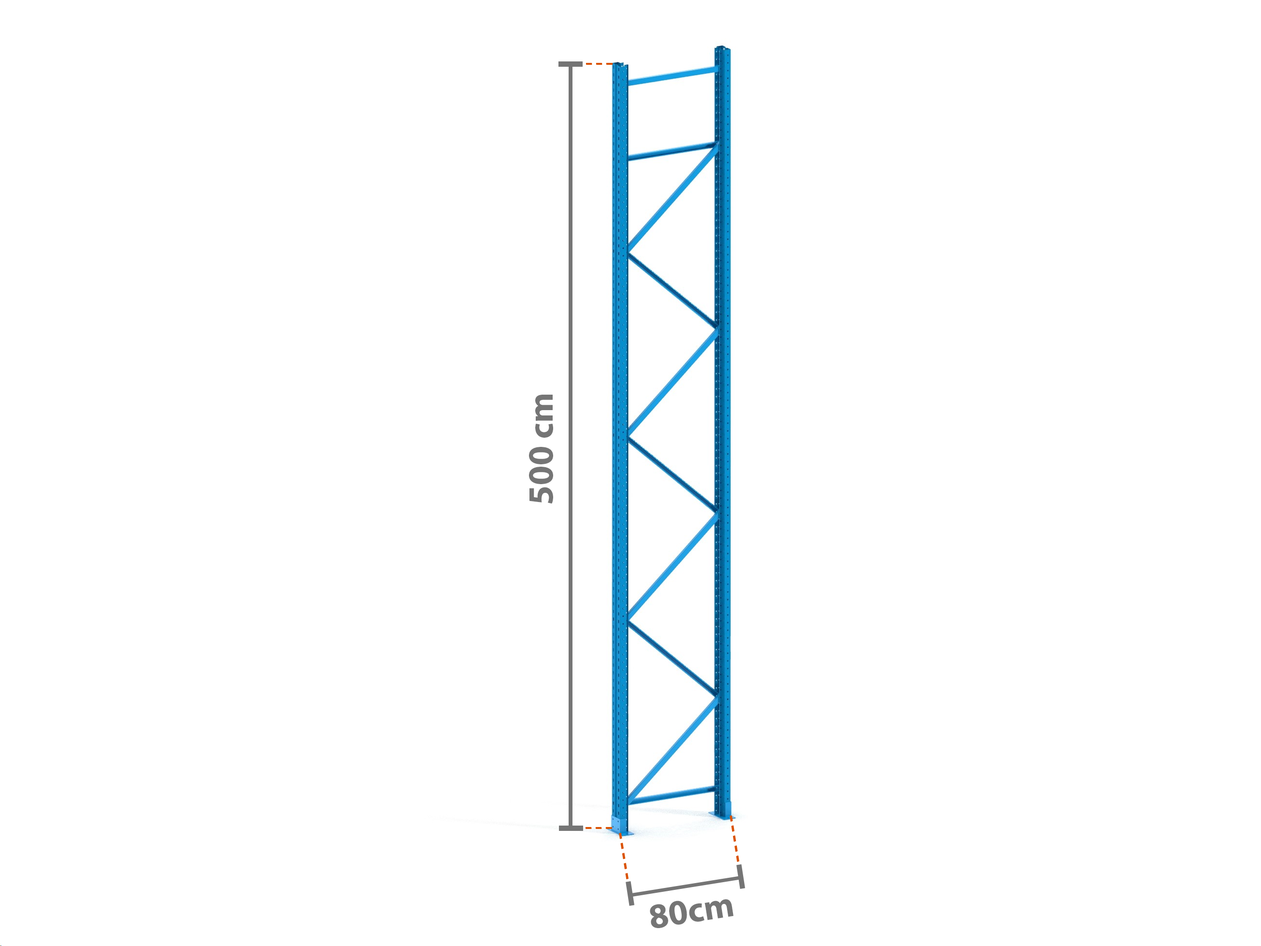
<style>
.page{position:relative;width:1261px;height:946px;background:#ffffff}
.page>*{position:absolute;margin:0}
.t1{font:35.5px "MyriadPro-Bold";color:#757575}
</style>
<div class="page">
<p class="t1" style="left:529px;top:395px;width:24px;height:109px;rotate:-90deg">500 cm</p>
<p class="t1" style="left:650px;top:899px;width:83px;height:29px;rotate:-9deg">80cm</p>
</div>
